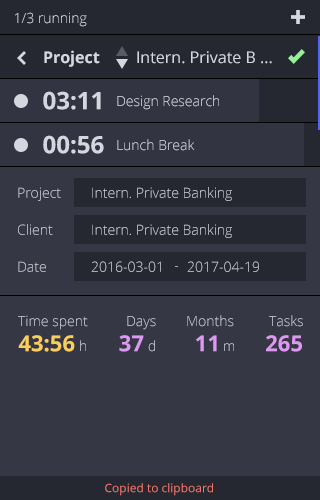
<style>
.page{position:relative;width:320px;height:500px;background:#353844}
.page>*{position:absolute;margin:0}
.t1{font:14px "OpenSans-Light";color:#d4d7e0}
.t2{font:16px "OpenSans-Bold";color:#d4d7e0}
.t3{font:16px "OpenSans";color:#d4d7e0}
.t4{font:24px "OpenSans-Bold";color:#d4d7e0;text-transform:uppercase}
.t5{font:14px "OpenSans-Light";color:#c8cad3}
.t6{font:14px "OpenSans-Light"}
.t7{font:22px "OpenSans-Bold";color:#face5c}
.t8{font:22px "OpenSans-Bold";color:#dd98f2}
.t9{font:12px "OpenSans";color:#ef7669}
</style>
<div class="page">
<p class="t1" style="left:15px;top:12px;width:72px;height:15px">1/3 running</p>
<p class="t2" style="left:44px;top:50px;width:56px;height:17px">Project</p>
<p class="t3" style="left:137px;top:51px;width:135px;height:13px">Intern. Private B ...</p>
<p class="t4" style="left:43px;top:91px;width:58px;height:19px">03:11</p>
<p class="t1" style="left:117px;top:95px;width:102px;height:15px">Design Research</p>
<p class="t4" style="left:43px;top:135px;width:61px;height:19px">00:56</p>
<p class="t1" style="left:117px;top:139px;width:78px;height:12px">Lunch Break</p>
<p class="t5" style="left:18px;top:187px;width:43px;height:14px">Project</p>
<p class="t5" style="left:92px;top:187px;width:140px;height:14px">Intern. Private Banking</p>
<p class="t5" style="left:18px;top:224px;width:35px;height:11px">Client</p>
<p class="t5" style="left:92px;top:224px;width:140px;height:14px">Intern. Private Banking</p>
<p class="t5" style="left:18px;top:261px;width:28px;height:11px">Date</p>
<p class="t5" style="left:91px;top:261px;width:70px;height:11px">2016-03-01</p>
<p class="t5" style="left:187px;top:261px;width:72px;height:11px">2017-04-19</p>
<p class="t5" style="left:18px;top:315px;width:70px;height:15px">Time spent</p>
<p class="t5" style="left:127px;top:316px;width:29px;height:14px">Days</p>
<p class="t6" style="left:187px;top:315px;width:47px;height:12px">Months</p>
<p class="t5" style="left:269px;top:315px;width:34px;height:12px">Tasks</p>
<p class="t7" style="left:18px;top:335px;width:57px;height:17px">43:56</p>
<p class="t6" style="left:80px;top:340px;width:6px;height:11px">h</p>
<p class="t8" style="left:119px;top:335px;width:25px;height:17px">37</p>
<p class="t5" style="left:148px;top:340px;width:7px;height:12px">d</p>
<p class="t8" style="left:196px;top:335px;width:21px;height:17px">11</p>
<p class="t8" style="left:266px;top:335px;width:36px;height:17px">265</p>
<p class="t6" style="left:224px;top:343px;width:10px;height:8px">m</p>
<p class="t9" style="left:105px;top:483px;width:108px;height:13px">Copied to clipboard</p>
</div>
